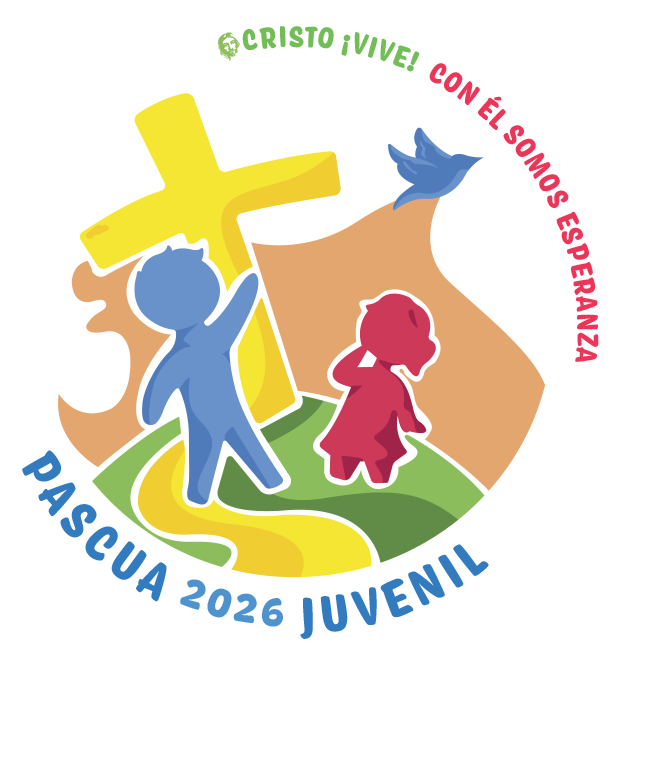
<style>
.page{position:relative;width:664px;height:778px;background:#ffffff}
.page>*{position:absolute;margin:0}
.t1{font:31.2px/11.7px "Coniferous-Black"}
.t2{font:54.4px/10.8px "Coniferous-Black";color:#317bbe}
.t3{font:45.8px/10.8px "Coniferous-Black";color:#317bbe}
</style>
<div class="page">
<p class="t1" style="left:242px;top:26px;width:357px;height:336px">CRISTO ¡VIVE!  CON ÉL SOMOS ESPERANZA</p>
<p class="t2" style="left:22px;top:450px;width:467px;height:189px">PASCUA <span class="t3">2026 </span>JUVENIL</p>
</div>
